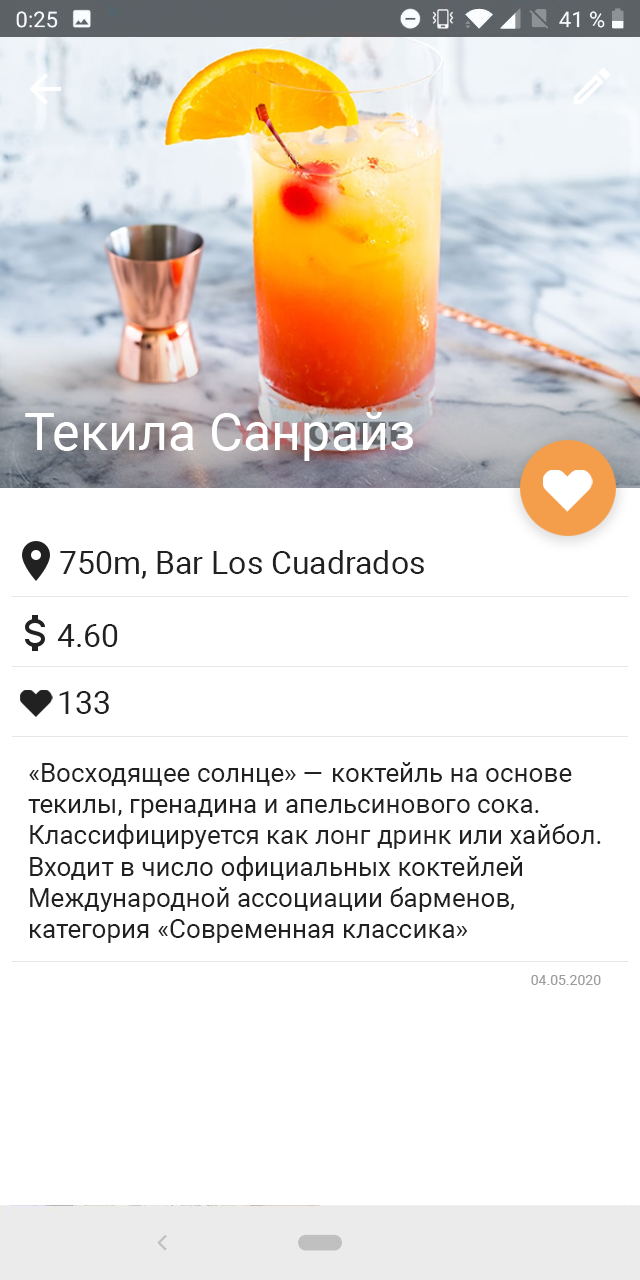
<style>
.page{position:relative;width:640px;height:1280px;background:#ffffff}
.page>*{position:absolute;margin:0}
.t1{font:52px "Roboto-Regular";color:#ffffff}
.t2{font:32px "Roboto-Regular";color:#212121}
.t3{font:26px "Roboto-Regular";color:#212121}
.t4{font:14px "Roboto-Regular";color:#9d9d9d}
</style>
<div class="page">
<p class="t1" style="left:25px;top:412px;width:388px;height:49px">Текила Санрайз</p>
<p class="t2" style="left:60px;top:550px;width:364px;height:29px">750m, Bar Los Cuadrados</p>
<p class="t2" style="left:57px;top:624px;width:61px;height:23px">4.60</p>
<p class="t2" style="left:59px;top:691px;width:50px;height:23px">133</p>
<p class="t3" style="left:28px;top:762px;width:573px;height:181px">«Восходя́щее со́лнце» — коктейль на основе <br>текилы, гренадина и апельсинового сока. <br>Классифицируется как лонг дринк или хайбол. <br>Входит в число официальных коктейлей <br>Международной ассоциации барменов, <br>категория «Современная классика»</p>
<p class="t4" style="left:531px;top:975px;width:70px;height:10px">04.05.2020</p>
</div>
